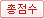
<style>
.page{position:relative;width:44px;height:19px}
.page>*{position:absolute;margin:0}
.t1{font:12px "morris9";color:#ba1c1c}
</style>
<div class="page">
<p class="t1" style="left:7px;top:4px;width:30px;height:10px">총점수</p>
</div>
